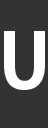
<style>
.page{position:relative;width:48px;height:128px;background:#333333}
.page>*{position:absolute;margin:0}
.t1{font:75px "AdobeGothicStd-Bold";color:#ffffff}
</style>
<div class="page">
<p class="t1" style="left:4px;top:31px;width:41px;height:59px">U</p>
</div>
